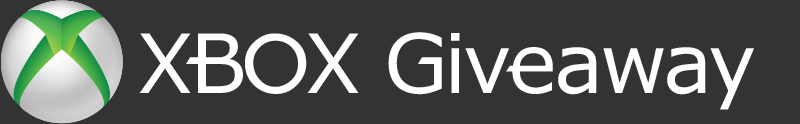
<style>
.page{position:relative;width:800px;height:124px;background:#333333}
.page>*{position:absolute;margin:0}
.t1{font:82px "XBOX360";letter-spacing:-0.038em;color:#ffffff}
</style>
<div class="page">
<p class="t1" style="left:139px;top:32px;width:615px;height:78px">XBOX Giveaway</p>
</div>
